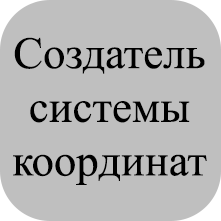
<style>
.page{position:relative;width:221px;height:221px;background:#bfbfbf}
.page>*{position:absolute;margin:0}
.t1{font:44.7px "TimesNewRomanPSMT";color:#000000}
</style>
<div class="page">
<p class="t1" style="left:13px;top:37px;width:194px;height:148px;text-align:center">Создатель<br>системы<br>координат</p>
</div>
